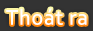
<style>
.page{position:relative;width:93px;height:31px;background:#333333}
.page>*{position:absolute;margin:0}
.t1{font:22px "Corbel";letter-spacing:0.035em;color:#ffffff}
</style>
<div class="page">
<p class="t1" style="left:6px;top:8px;width:81px;height:17px">Thoát ra</p>
</div>
